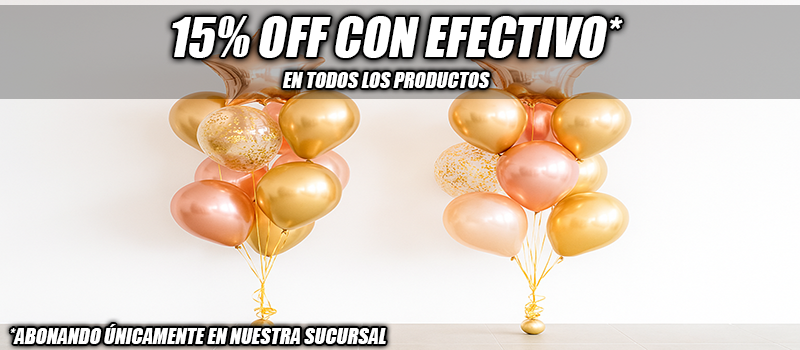
<style>
.page{position:relative;width:800px;height:350px}
.page>*{position:absolute;margin:0}
.t1{font:50px "Impact";color:#ffffff;font-style:italic}
.t2{font:20px "Impact";color:#ffffff;font-style:italic}
</style>
<div class="page">
<p class="t1" style="left:172px;top:16px;width:451px;height:42px">15% OFF CON EFECTIVO*</p>
<p class="t2" style="left:282px;top:72px;width:208px;height:16px">EN TODOS LOS PRODUCTOS</p>
<p class="t2" style="left:10px;top:324px;width:376px;height:20px">*ABONANDO ÚNICAMENTE EN NUESTRA SUCURSAL</p>
</div>
